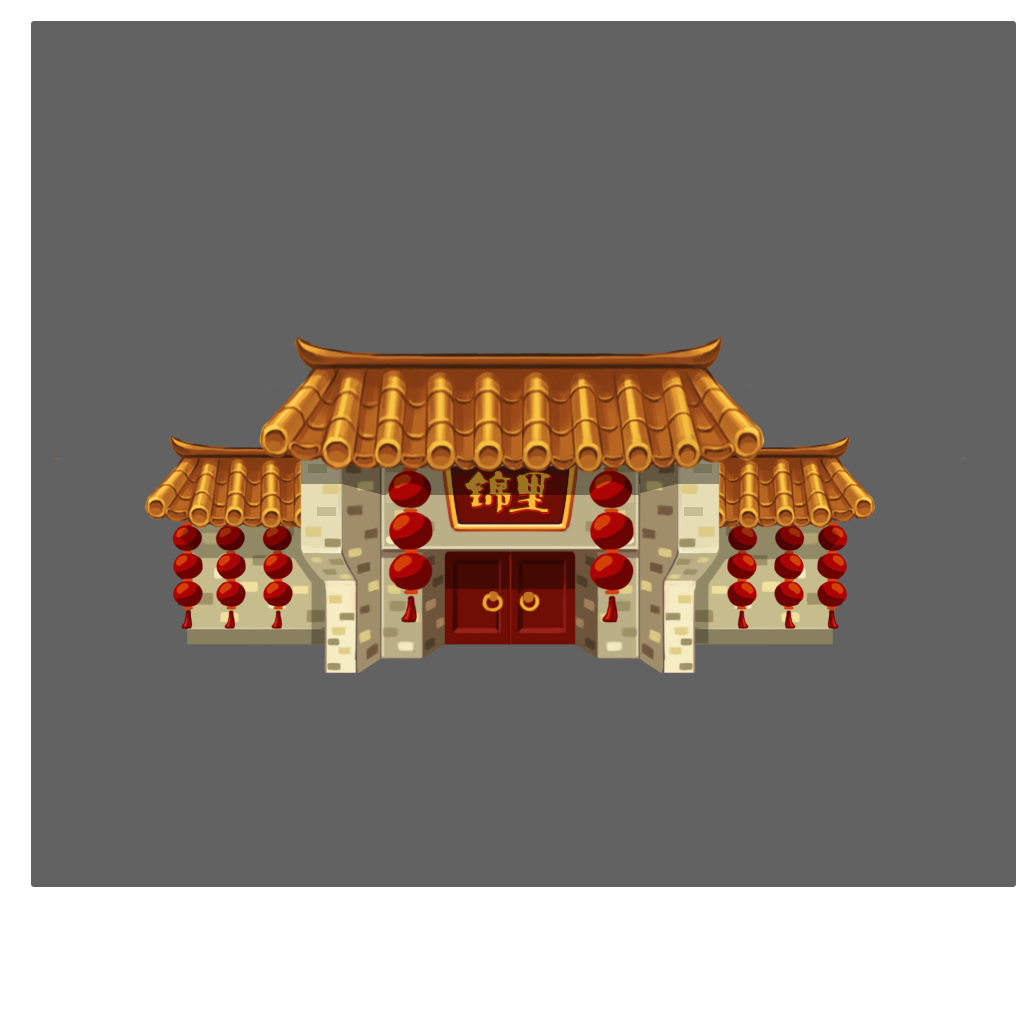
<style>
.page{position:relative;width:1024px;height:1024px;background:#626262}
.page>*{position:absolute;margin:0}
.t1{font:42.9px "Ò¶¸ùÓÑÌØÉ«¼òÌåÉý¼¶°æ";font-weight:bold}
</style>
<div class="page">
<p class="t1" style="left:464px;top:470px;width:86px;height:42px">锦里</p>
</div>
